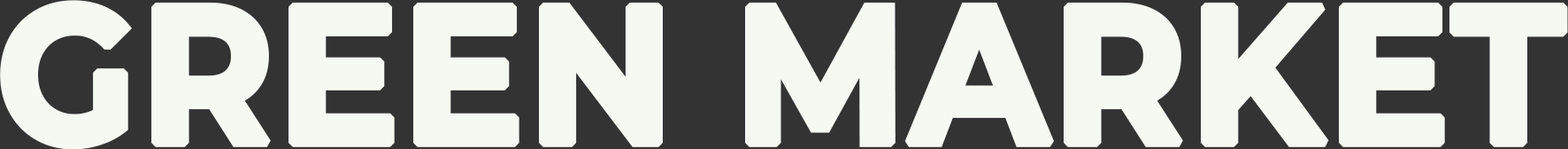
<style>
.page{position:relative;width:1568px;height:149px;background:#f6f8f2}
.page>*{position:absolute;margin:0}
.t1{font:193.7px "Montserrat-Bold";color:#f6f8f2;font-weight:bold;scale:0.93 1}
</style>
<div class="page">
<p class="t1" style="left:0px;top:0px;width:1568px;height:150px">GREEN MARKET</p>
</div>
